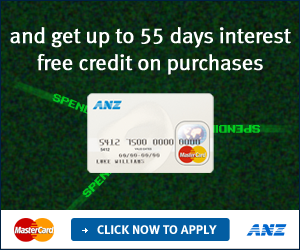
<style>
.page{position:relative;width:300px;height:250px}
.page>*{position:absolute;margin:0}
.t1{font:22px/27px "MetaNormalLF-Roman";letter-spacing:-0.02em;color:#ffffff;font-weight:bold}
.t2{font:8.5px "Standard0763";letter-spacing:-0.015em;font-weight:bold}
.t3{font:8.5px "Standard0763";letter-spacing:-0.015em;color:#04cb21;font-weight:bold}
.t4{font:13px "MetaBoldLF-Roman";color:#ffffff}
</style>
<div class="page">
<p class="t1" style="left:10px;top:27px;width:281px;height:48px;text-align:center">and get up to 55 days interest<br>free credit on purchases</p>
<p class="t2" style="left:52px;top:93px;width:60px;height:29px;rotate:21deg">SPENDING</p>
<p class="t3" style="left:198px;top:125px;width:62px;height:8px;rotate:-180deg">SPENDING</p>
<p class="t4" style="left:97px;top:225px;width:120px;height:9px">CLICK NOW TO APPLY NOW</p>
</div>
